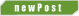
<style>
.page{position:relative;width:79px;height:16px;background:#669933}
.page>*{position:absolute;margin:0}
.t1{font:10px "Impact";letter-spacing:0.2em;color:#ffffff}
</style>
<div class="page">
<p class="t1" style="left:14px;top:3px;width:48px;height:9px">newPost</p>
</div>
